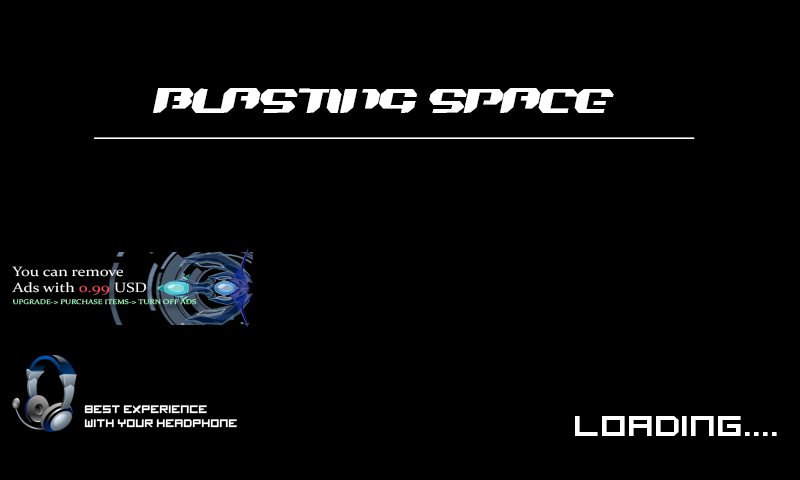
<style>
.page{position:relative;width:800px;height:480px;background:#000000}
.page>*{position:absolute;margin:0}
.t1{font:24px "BionicKidSimpleSlanted";color:#ffffff}
.t2{font:24px "MyriadPro-Regular";color:#ffffff}
.t3{font:13.6px "Constantia";color:#ffffff;scale:1.21 1}
.t4{font:13.6px "Constantia";color:#ff4d4d;scale:1.21 1}
.t5{font:6.8px "Constantia";color:#a1f9bc;scale:1.21 1}
.t6{font:12px "imagine-font";color:#ffffff}
.t7{font:32px "imagine-font";color:#ffffff;scale:1.12 1}
</style>
<div class="page">
<p class="t1" style="left:153px;top:88px;width:461px;height:25px">BLASTING SPACE</p>
<p class="t2" style="left:94px;top:137px;width:601px;height:2px">__________________________________________________</p>
<p class="t3" style="left:12px;top:266px;width:135px;height:29px">You can remove <br>Ads with <span class="t4">0.99 </span>USD</p>
<p class="t5" style="left:13px;top:299px;width:184px;height:6px">UPGRADE-&gt; PURCHASE ITEMS-&gt; TURN OFF ADS</p>
<p class="t6" style="left:84px;top:405px;width:153px;height:23px">best experience <br>with your headphone</p>
<p class="t7" style="left:575px;top:416px;width:202px;height:20px">LOADING....</p>
</div>
